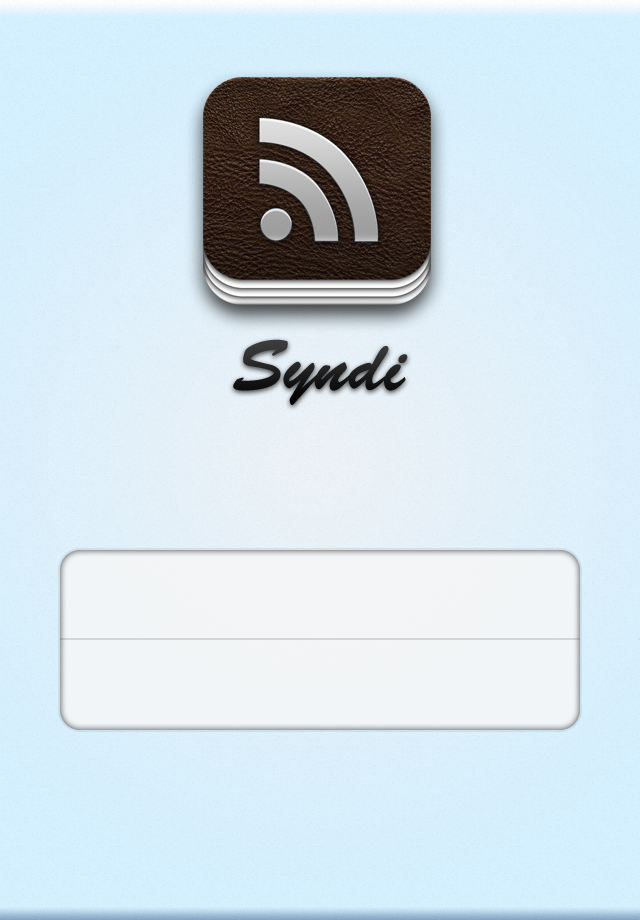
<style>
.page{position:relative;width:640px;height:920px}
.page>*{position:absolute;margin:0}
.t1{font:72px "BrushScriptStd";color:#1b1b1b}
</style>
<div class="page">
<p class="t1" style="left:233px;top:339px;width:175px;height:66px">Syndi</p>
</div>
